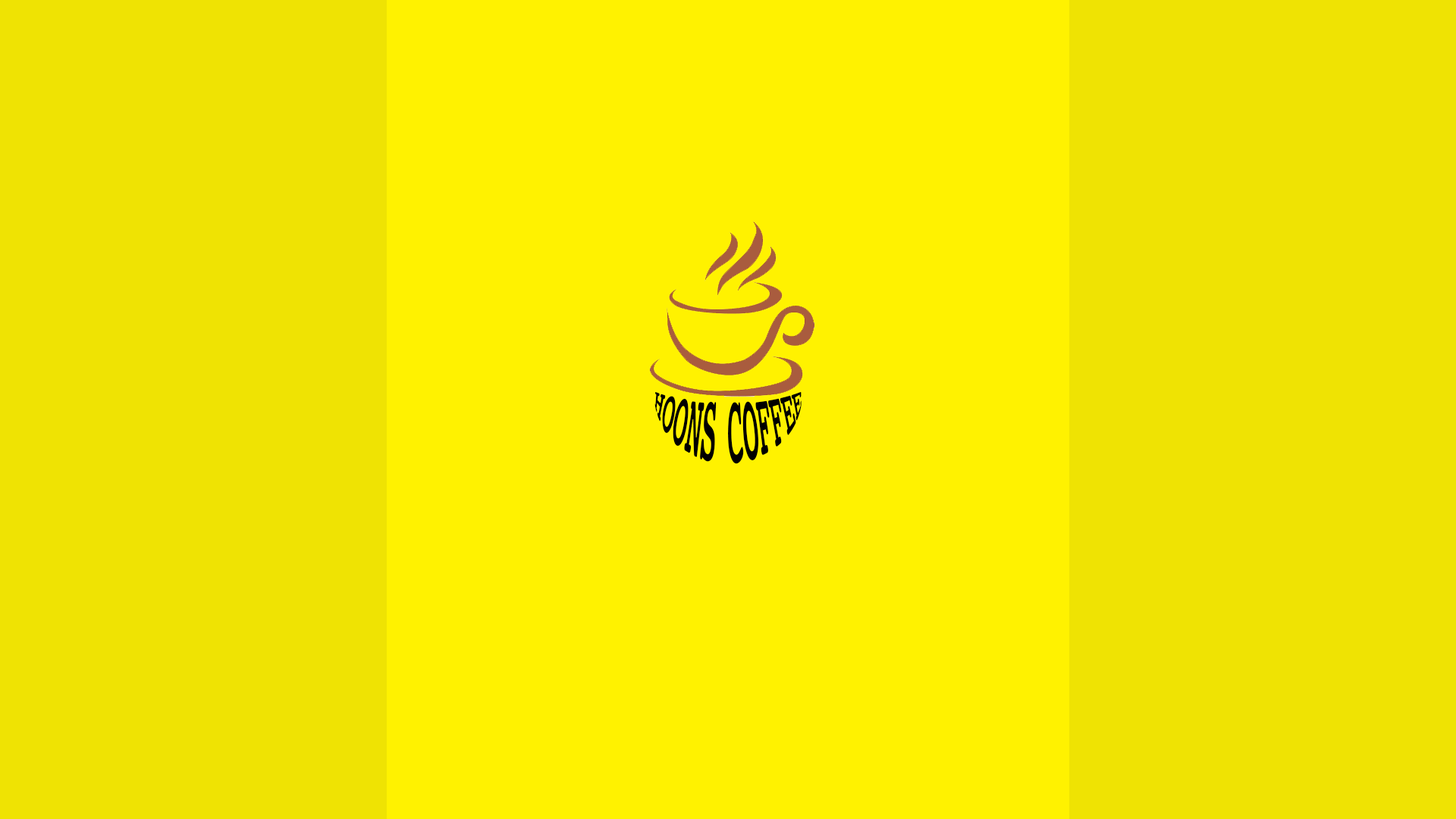
<style>
.page{position:relative;width:1456px;height:819px;background:#efe303}
.page>*{position:absolute;margin:0}
.t1{font:19px "(ÇÑ)¹°¹æ¿ïB";color:#000000}
</style>
<div class="page">
<p class="t1" style="left:654px;top:391px;width:148px;height:73px">HOONS COFFEE</p>
</div>
